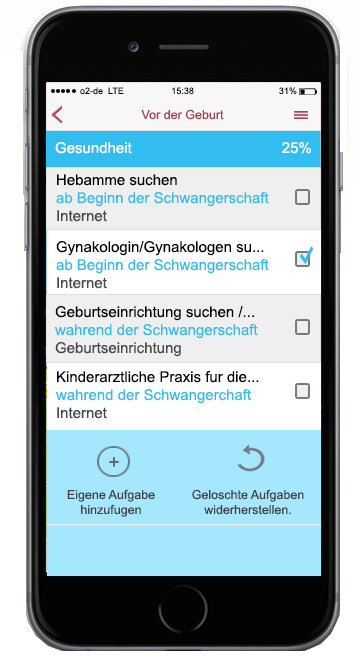
<style>
.page{position:relative;width:360px;height:660px;background:#ffffff}
.page>*{position:absolute;margin:0}
.t1{font:9px "ArialMT";color:#000000}
.t2{font:12.5px "ArialMT";color:#aa3a4f}
.t3{font:15px "ArialMT";color:#ffffff}
.t4{font:15px "ArialMT";color:#31bdef}
.t5{font:15px "ArialMT";color:#000000}
.t6{font:15px "ArialMT";color:#474849}
.t7{font:20px "ArialMT";color:#5b6e76}
.t8{font:12.5px "ArialMT";color:#434344}
</style>
<div class="page">
<p class="t1" style="left:80px;top:87px;width:217px;height:8px">o2-de  LTE                   15:38                                  31%</p>
<p class="t2" style="left:141px;top:109px;width:83px;height:11px">Vor der Geburt</p>
<p class="t3" style="left:55px;top:142px;width:256px;height:12px">Gesundheit                                    25%</p>
<p class="t4" style="left:56px;top:174px;width:213px;height:48px"><span class="t5">Hebamme suchen<br></span>ab Beginn der Schwangerschaft<br><span class="t6">Internet</span></p>
<p class="t5" style="left:56px;top:241px;width:213px;height:48px">Gynakologin/Gynakologen su...<br><span class="t4">ab Beginn der Schwangerschaft<br></span><span class="t6">Internet</span></p>
<p class="t5" style="left:55px;top:306px;width:203px;height:51px">Geburtseinrichtung suchen /...<br><span class="t4">wahrend der Schwangerschaft <br></span><span class="t6">Geburtseinrichtung</span></p>
<p class="t5" style="left:56px;top:371px;width:203px;height:48px">Kinderarztliche Praxis fur die...<br><span class="t4">wahrend der Schwangerchaft<br></span><span class="t6">Internet</span></p>
<p class="t7" style="left:109px;top:457px;width:10px;height:10px">+</p>
<p class="t8" style="left:67px;top:489px;width:88px;height:28px;text-align:center">Eigene Aufgabe<br>hinzufugen</p>
<p class="t8" style="left:192px;top:489px;width:112px;height:26px;text-align:center">Geloschte Aufgaben<br>widerherstellen.</p>
</div>
